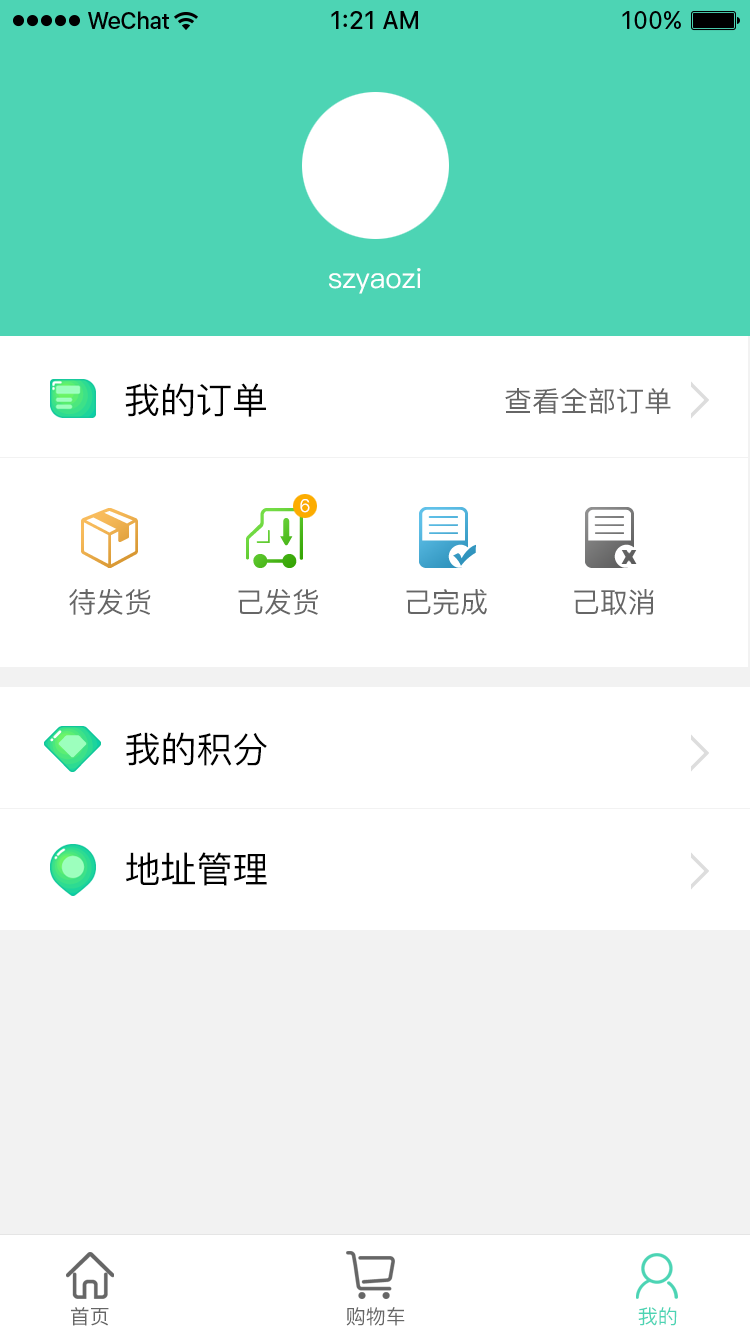
<style>
.page{position:relative;width:750px;height:1334px;background:#ffffff}
.page>*{position:absolute;margin:0}
.t1{font:28px "PingFang-SC-Medium";color:#ffffff}
.t2{font:36px "PingFang-SC-Medium";color:#000000}
.t3{font:28px "PingFang-SC-Medium";color:#666666}
.t4{font:18px "PingFang-SC-Medium";color:#ffffff}
.t5{font:36px/120px "PingFang-SC-Medium";color:#000000}
.t6{font:20px "PingFang-SC-Medium";color:#666666}
.t7{font:20px "PingFang-SC-Medium";color:#4cd4b4}
</style>
<div class="page">
<p class="t1" style="left:329px;top:268px;width:92px;height:26px">szyaozi</p>
<p class="t2" style="left:125px;top:383px;width:141px;height:34px">我的订单</p>
<p class="t3" style="left:505px;top:388px;width:166px;height:26px">查看全部订单</p>
<p class="t4" style="left:300px;top:499px;width:10px;height:14px">6</p>
<p class="t3" style="left:69px;top:589px;width:585px;height:26px">待发货         己发货         己完成         己取消</p>
<p class="t5" style="left:126px;top:732px;width:141px;height:154px">我的积分<br>地址管理</p>
<p class="t6" style="left:71px;top:1307px;width:38px;height:19px">首页</p>
<p class="t6" style="left:346px;top:1307px;width:59px;height:19px">购物车</p>
<p class="t7" style="left:638px;top:1307px;width:39px;height:19px">我的</p>
</div>
